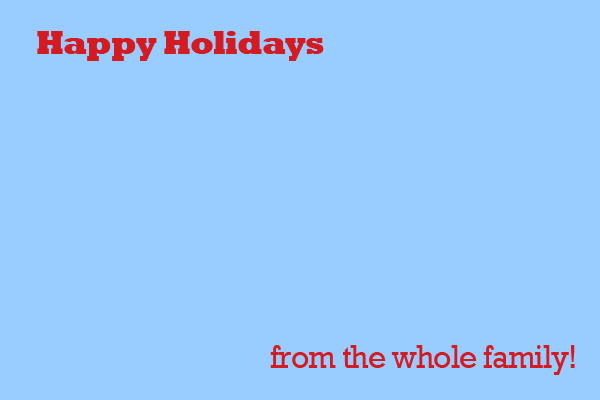
<style>
.page{position:relative;width:600px;height:400px;background:#99cdff}
.page>*{position:absolute;margin:0}
.t1{font:34px "Rockwell-ExtraBold";letter-spacing:-0.035em;color:#d41b21;scale:0.95 1}
.t2{font:34px "Rockwell";letter-spacing:-0.035em;color:#d41b21;scale:0.95 1}
</style>
<div class="page">
<p class="t1" style="left:37px;top:31px;width:287px;height:30px">Happy Holidays</p>
<p class="t2" style="left:270px;top:345px;width:305px;height:30px">from the whole family!</p>
</div>
